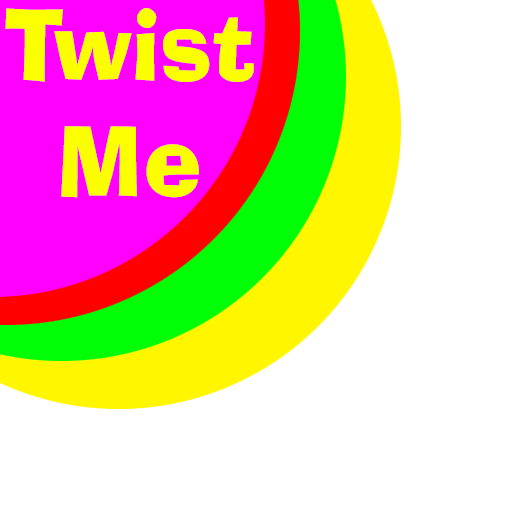
<style>
.page{position:relative;width:512px;height:512px;background:#ffffff}
.page>*{position:absolute;margin:0}
.t1{font:95.8px "AdLibWin95BT";color:#fcff00}
</style>
<div class="page">
<p class="t1" style="left:5px;top:8px;width:249px;height:190px;text-align:center">Twist<br>Me</p>
</div>
